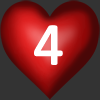
<style>
.page{position:relative;width:100px;height:100px;background:#333333}
.page>*{position:absolute;margin:0}
.t1{font:60px "Calibri";color:#ffffff;font-weight:bold}
</style>
<div class="page">
<p class="t1" style="left:34px;top:25px;width:29px;height:40px">4</p>
</div>
